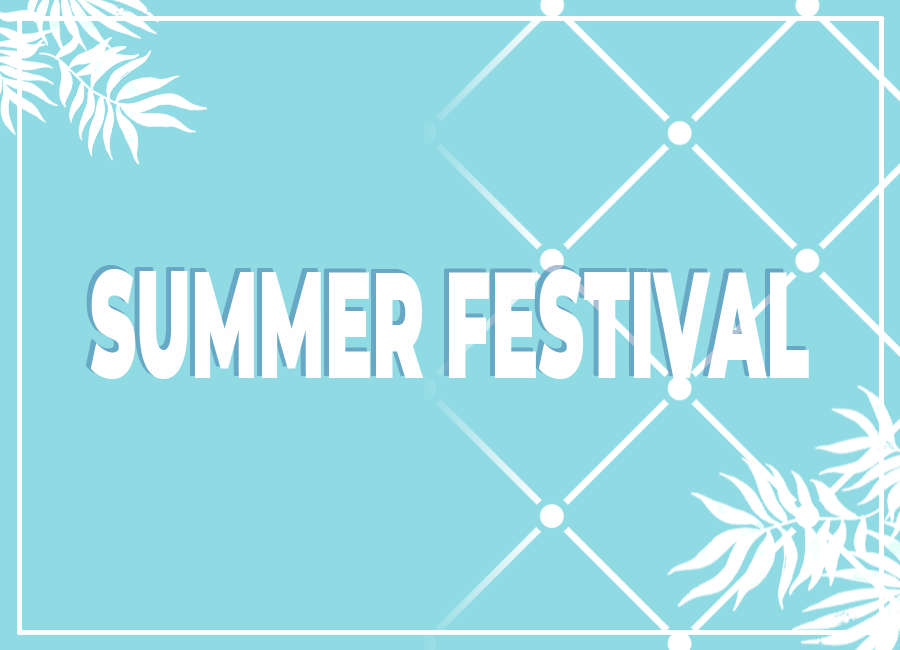
<style>
.page{position:relative;width:900px;height:650px;background:#8fdae3}
.page>*{position:absolute;margin:0}
.t1{font:150px "Montserrat-Black";color:#fefeff;scale:0.47 1}
</style>
<div class="page">
<p class="t1" style="left:90px;top:269px;width:719px;height:110px">SUMMER FESTIVAL</p>
</div>
